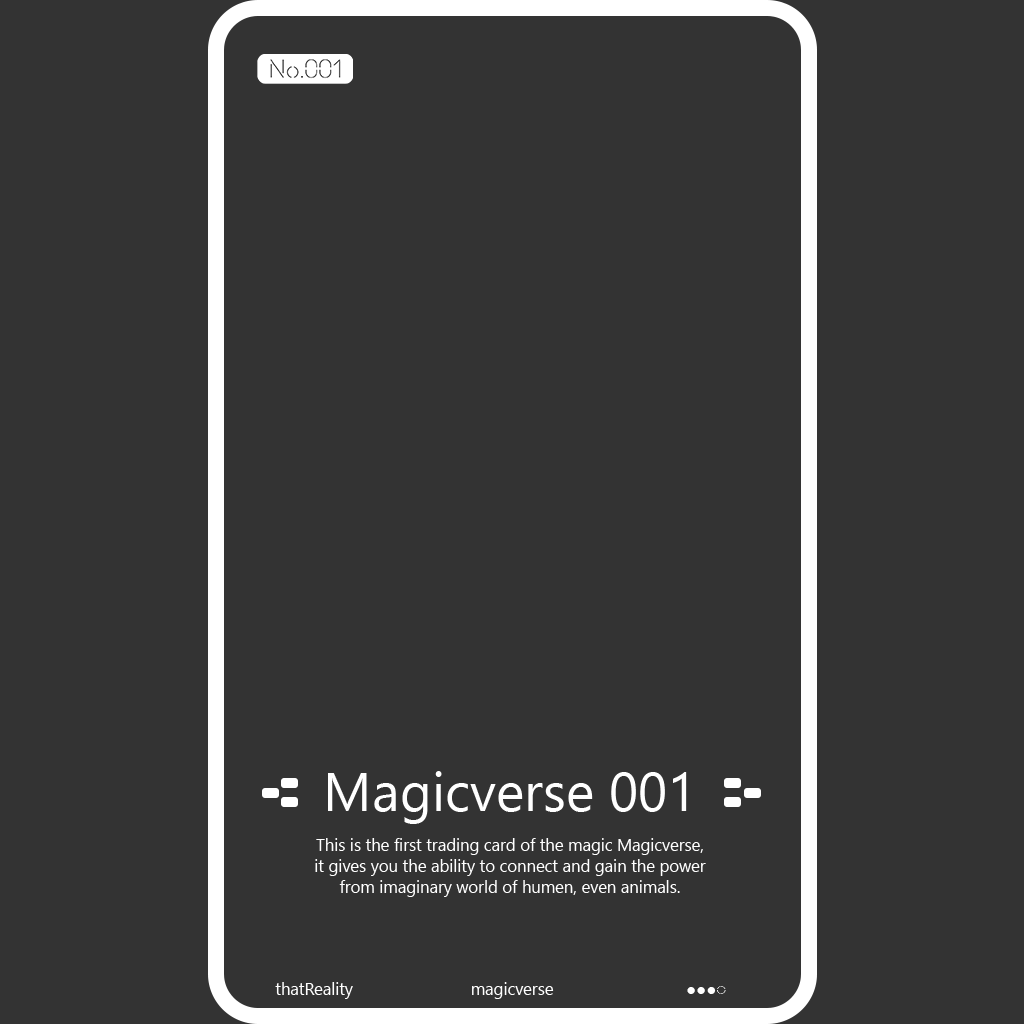
<style>
.page{position:relative;width:1024px;height:1024px;background:#333333}
.page>*{position:absolute;margin:0}
.t1{font:54.2px "SegoeUI";color:#ffffff}
.t2{font:16.7px/20.8px "SegoeUI";color:#ffffff}
.t3{font:16.7px "SegoeUI";color:#ffffff}
</style>
<div class="page">
<p class="t1" style="left:328px;top:771px;width:359px;height:53px">Magicverse 001</p>
<p class="t2" style="left:315px;top:838px;width:391px;height:59px;text-align:center">This is the first trading card of the magic Magicverse, it gives you the ability to connect and gain the power from imaginary world of humen, even animals.</p>
<p class="t3" style="left:275px;top:982px;width:78px;height:17px">thatReality</p>
<p class="t3" style="left:472px;top:982px;width:82px;height:17px">magicverse</p>
<p class="t3" style="left:687px;top:986px;width:39px;height:8px">●●●◌</p>
</div>
